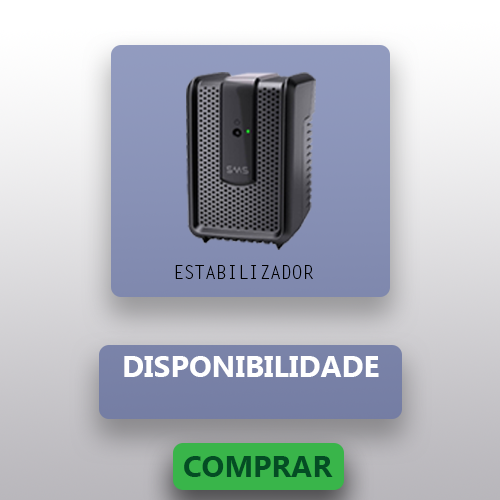
<style>
.page{position:relative;width:500px;height:500px}
.page>*{position:absolute;margin:0}
.t1{font:18px "LetterGothicStd";color:#000000}
.t2{font:30px "MicrosoftTaiLe-Bold";color:#ffffff}
.t3{font:30px "MicrosoftTaiLe-Bold";color:#044d24}
</style>
<div class="page">
<p class="t1" style="left:175px;top:265px;width:138px;height:14px">ESTABILIZADOR</p>
<p class="t2" style="left:124px;top:356px;width:255px;height:21px">DISPONIBILIDADE</p>
<p class="t3" style="left:184px;top:456px;width:149px;height:21px">COMPRAR</p>
</div>
